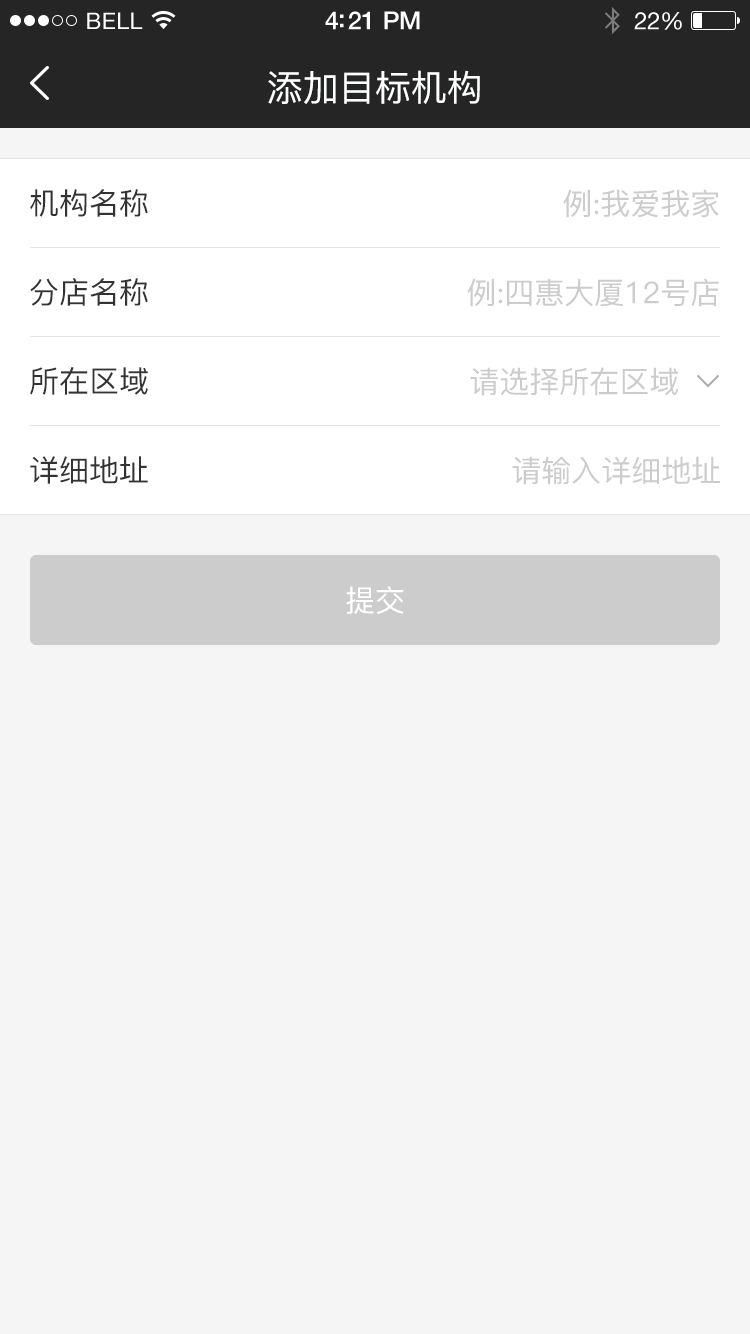
<style>
.page{position:relative;width:750px;height:1334px;background:#f5f5f5}
.page>*{position:absolute;margin:0}
.t1{font:23px "HelveticaNeue";letter-spacing:0.02em;color:#ffffff}
.t2{font:25px "HelveticaNeue-Medium";letter-spacing:-0.02em;color:#ffffff}
.t3{font:24px "HelveticaNeue";letter-spacing:-0.02em;color:#ffffff}
.t4{font:36px "PingFang-SC-Medium";color:#feffff}
.t5{font:30px "PingFang-SC-Medium";color:#333333}
.t6{font:30px "PingFang-SC-Medium";color:#cccccc}
.t7{font:30px "PingFang-SC-Medium";color:#ffffff}
</style>
<div class="page">
<p class="t1" style="left:87px;top:12px;width:56px;height:17px">BELL</p>
<p class="t2" style="left:325px;top:11px;width:95px;height:19px">4:21 PM</p>
<p class="t3" style="left:634px;top:12px;width:48px;height:18px">22%</p>
<p class="t4" style="left:268px;top:70px;width:212px;height:34px">添加目标机构</p>
<p class="t5" style="left:30px;top:189px;width:118px;height:28px">机构名称</p>
<p class="t6" style="left:563px;top:189px;width:156px;height:29px">例:我爱我家</p>
<p class="t5" style="left:30px;top:278px;width:118px;height:28px">分店名称</p>
<p class="t6" style="left:467px;top:278px;width:252px;height:29px">例:四惠大厦12号店</p>
<p class="t5" style="left:30px;top:367px;width:118px;height:28px">所在区域</p>
<p class="t6" style="left:470px;top:367px;width:208px;height:29px">请选择所在区域</p>
<p class="t5" style="left:30px;top:456px;width:118px;height:28px">详细地址</p>
<p class="t6" style="left:512px;top:456px;width:208px;height:29px">请输入详细地址</p>
<p class="t7" style="left:346px;top:586px;width:58px;height:28px">提交</p>
</div>
